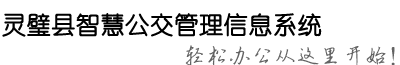
<style>
.page{position:relative;width:400px;height:65px;background:#ffffff}
.page>*{position:absolute;margin:0}
.t1{font:24px "YouYuan";color:#000000;font-weight:bold}
</style>
<div class="page">
<p class="t1" style="left:2px;top:13px;width:320px;height:24px">灵璧县智慧公交管理信息系统</p>
</div>
